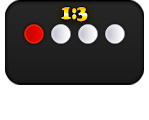
<style>
.page{position:relative;width:149px;height:120px;background:#ffffff}
.page>*{position:absolute;margin:0}
.t1{font:21.6px "UTM-Cooper-Black";scale:0.83 1}
</style>
<div class="page">
<p class="t1" style="left:61px;top:7px;width:27px;height:15px">1:3</p>
</div>
